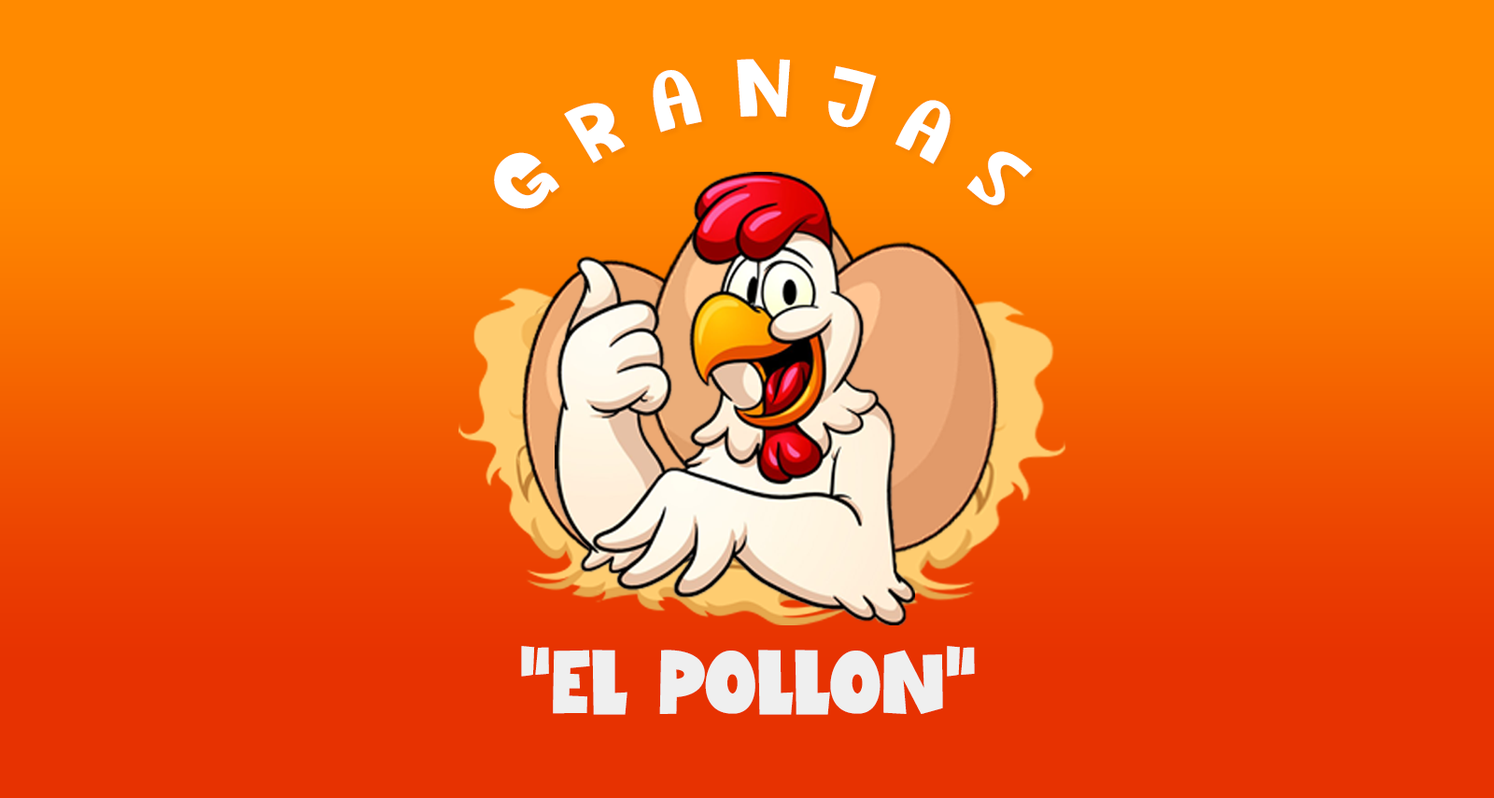
<style>
.page{position:relative;width:1494px;height:798px}
.page>*{position:absolute;margin:0}
.t1{font:65.9px "CallMeBabyRegular";letter-spacing:0.4em;color:#ffffff}
.t2{font:92.9px "TheGeorgiaRegular";color:#efefef;scale:1.1 1}
</style>
<div class="page">
<p class="t1" style="left:494px;top:59px;width:538px;height:150px;rotate:2deg">GRANJAS</p>
<p class="t2" style="left:521px;top:646px;width:454px;height:69px">“EL POLLON”</p>
</div>
